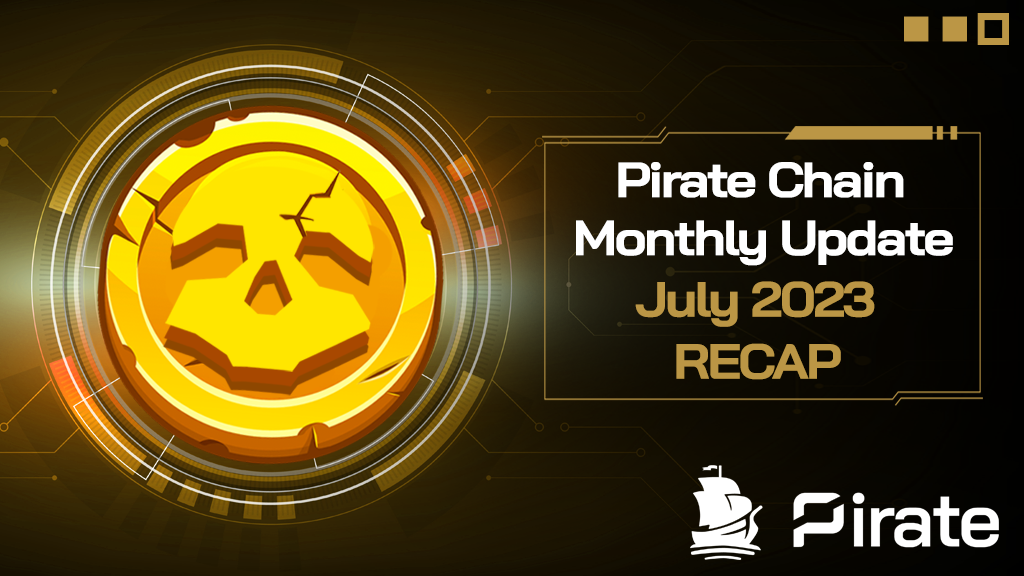
<style>
.page{position:relative;width:1024px;height:576px}
.page>*{position:absolute;margin:0}
.t1{font:49.3px "BaiJamjuree-Bold";letter-spacing:-0.05em;color:#ffffff;scale:1.1 1}
.t2{font:49.3px "BaiJamjuree-Bold";letter-spacing:-0.05em;color:#bb9645;scale:1.1 1}
</style>
<div class="page">
<p class="t1" style="left:618px;top:162px;width:286px;height:36px">Pirate Chain</p>
<p class="t1" style="left:576px;top:220px;width:377px;height:46px">Monthly Update</p>
<p class="t2" style="left:635px;top:281px;width:240px;height:46px">July 2023</p>
<p class="t2" style="left:676px;top:343px;width:165px;height:37px">RECAP</p>
</div>
